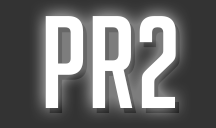
<style>
.page{position:relative;width:216px;height:128px;background:#333333}
.page>*{position:absolute;margin:0}
.t1{font:128px "BigNoodleTitling";color:#fefefe}
</style>
<div class="page">
<p class="t1" style="left:45px;top:16px;width:131px;height:92px">pr2</p>
</div>
